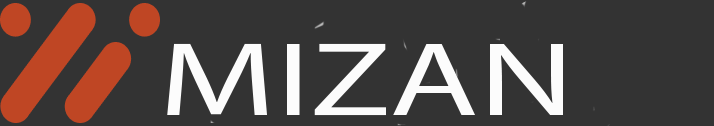
<style>
.page{position:relative;width:714px;height:126px;background:#333333}
.page>*{position:absolute;margin:0}
.t1{font:104.9px "MyriadPro-Regular";color:#fcfcfc;scale:1.38 1}
</style>
<div class="page">
<p class="t1" style="left:167px;top:43px;width:396px;height:73px">MIZAN</p>
</div>
